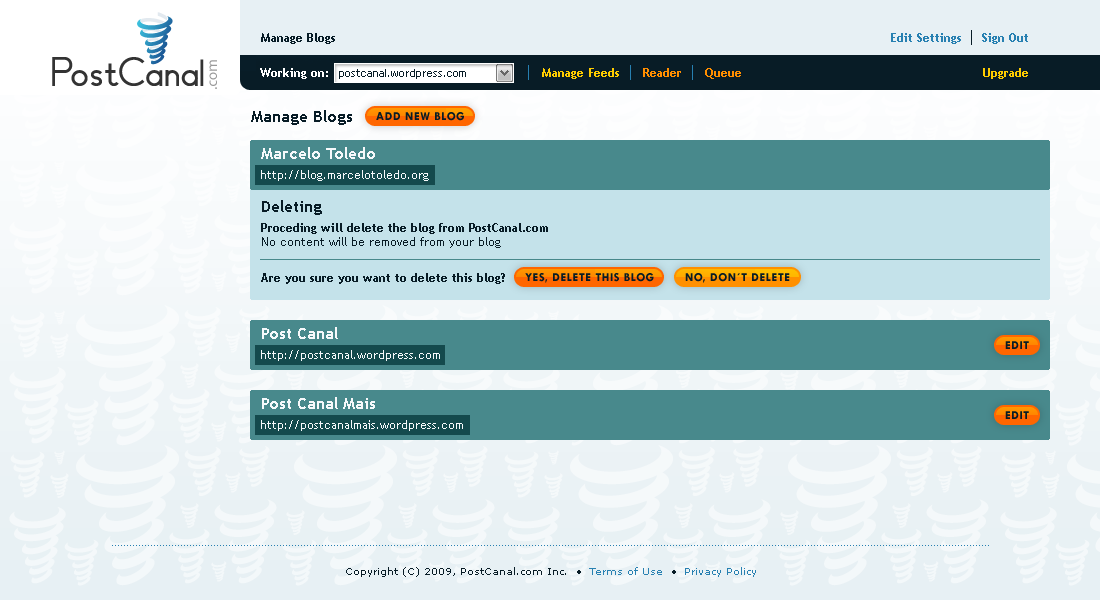
<style>
.page{position:relative;width:1100px;height:600px}
.page>*{position:absolute;margin:0}
.t1{font:12px "TrebuchetMS-Bold";color:#081c26}
.t2{font:12px "TrebuchetMS-Bold";color:#2780b1}
.t3{font:12px "TrebuchetMS-Bold";color:#ffffff}
.t4{font:11px "TrebuchetMS";color:#081c26}
.t5{font:12px "TrebuchetMS-Bold";color:#ffcc00}
.t6{font:12px "TrebuchetMS-Bold";color:#ff8e00}
.t7{font:16px "TrebuchetMS-Bold";color:#081c26}
.t8{font:12px "TwCenMT-Bold";letter-spacing:0.05em;color:#081c26;text-transform:uppercase}
.t9{font:16px "TrebuchetMS-Bold";color:#f6f9fb}
.t10{font:12px "TrebuchetMS";color:#f6f9fb}
.t11{font:12px "TrebuchetMS";color:#081c26}
.t12{font:10px "Verdana";color:#081c26}
.t13{font:10px "Verdana";color:#2780b1}
</style>
<div class="page">
<p class="t1" style="left:261px;top:33px;width:74px;height:11px">Manage Blogs</p>
<p class="t2" style="left:891px;top:33px;width:70px;height:11px">Edit Settings</p>
<p class="t2" style="left:982px;top:33px;width:46px;height:11px">Sign Out</p>
<p class="t3" style="left:260px;top:68px;width:68px;height:11px">Working on:</p>
<p class="t4" style="left:339px;top:69px;width:127px;height:10px">postcanal.wordpress.com</p>
<p class="t5" style="left:542px;top:68px;width:77px;height:11px">Manage Feeds</p>
<p class="t6" style="left:643px;top:68px;width:38px;height:9px">Reader</p>
<p class="t6" style="left:705px;top:68px;width:36px;height:11px">Queue</p>
<p class="t5" style="left:983px;top:68px;width:45px;height:11px">Upgrade</p>
<p class="t7" style="left:251px;top:110px;width:101px;height:15px">Manage Blogs</p>
<p class="t8" style="left:376px;top:112px;width:88px;height:9px">Add new blog</p>
<p class="t9" style="left:261px;top:147px;width:114px;height:12px">Marcelo Toledo</p>
<p class="t10" style="left:261px;top:170px;width:168px;height:11px">http://blog.marcelotoledo.org</p>
<p class="t7" style="left:262px;top:200px;width:60px;height:15px">Deleting</p>
<p class="t1" style="left:261px;top:223px;width:287px;height:25px">Proceding will delete the blog from PostCanal.com<br><span class="t11">No content will be removed from your blog</span></p>
<p class="t1" style="left:261px;top:273px;width:244px;height:11px">Are you sure you want to delete this blog?</p>
<p class="t8" style="left:525px;top:273px;width:129px;height:10px">yes, delete this blog</p>
<p class="t8" style="left:685px;top:273px;width:105px;height:10px">no, don´t delete</p>
<p class="t9" style="left:262px;top:327px;width:76px;height:12px">Post Canal</p>
<p class="t8" style="left:1005px;top:341px;width:24px;height:8px">edit</p>
<p class="t10" style="left:261px;top:350px;width:179px;height:11px">http://postcanal.wordpress.com</p>
<p class="t9" style="left:262px;top:397px;width:113px;height:12px">Post Canal Mais</p>
<p class="t10" style="left:261px;top:420px;width:202px;height:11px">http://postcanalmais.wordpress.com</p>
<p class="t12" style="left:346px;top:567px;width:410px;height:10px">Copyright (C) 2009, PostCanal.com Inc.  • <span class="t13"> Terms of Use</span>  •  <span class="t13">Privacy Policy</span></p>
</div>
